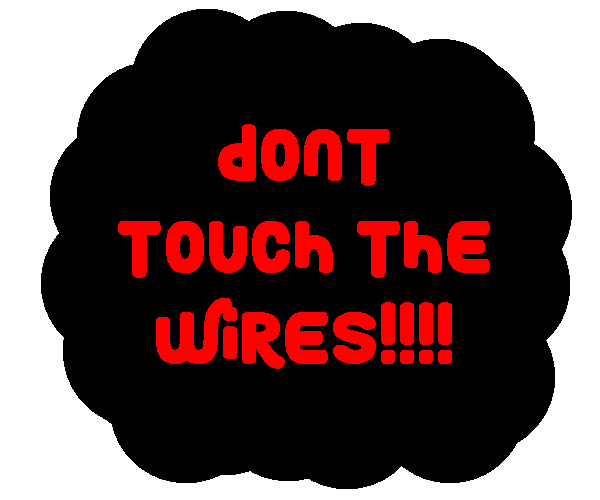
<style>
.page{position:relative;width:600px;height:500px;background:#000000}
.page>*{position:absolute;margin:0}
.t1{font:76.4px "RoundyRainbows";color:#fe0000}
</style>
<div class="page">
<p class="t1" style="left:118px;top:124px;width:372px;height:245px;text-align:center">DONT<br>TOUCH the wires!!!!</p>
</div>
